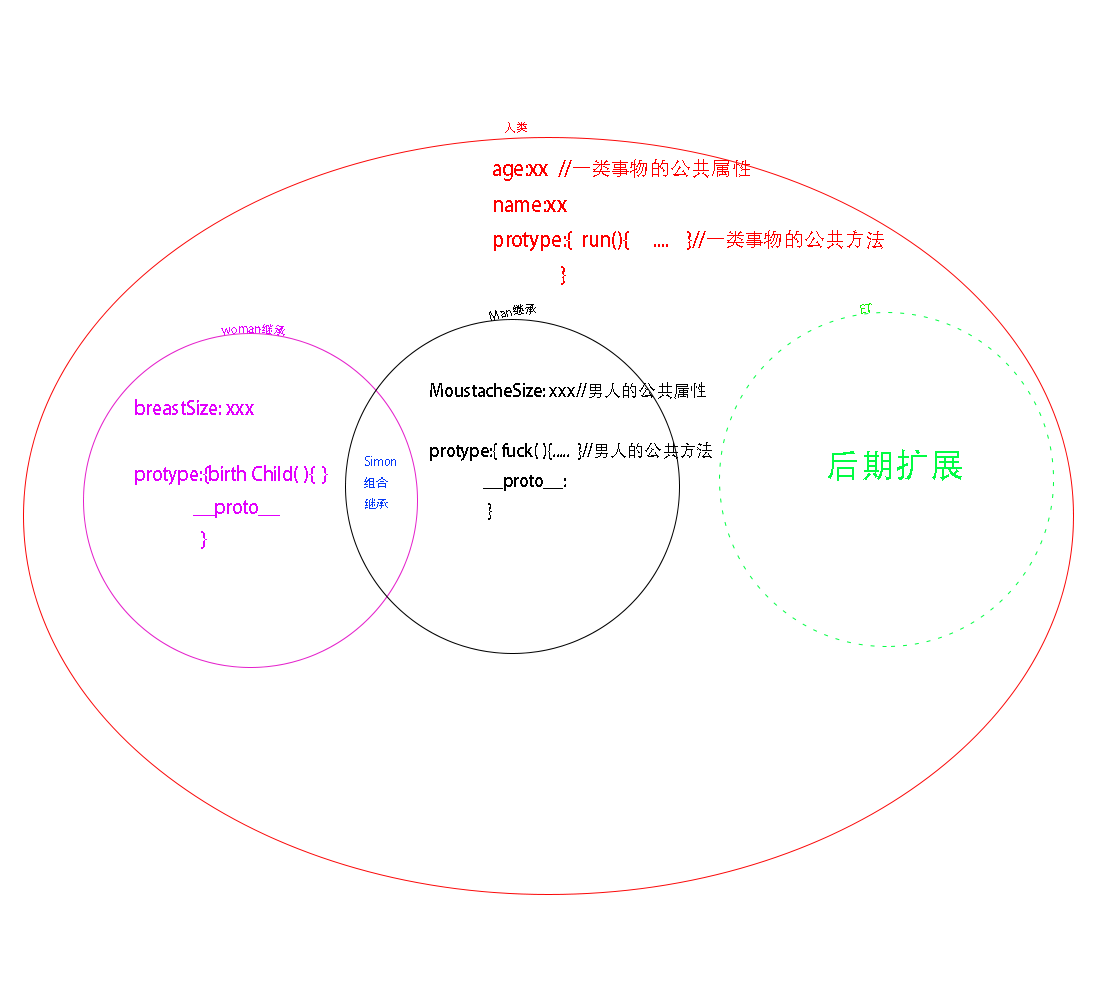
<style>
.page{position:relative;width:1117px;height:1000px;background:#ffffff}
.page>*{position:absolute;margin:0}
.t1{font:12px "AdobeHeitiStd-Regular";color:#fd020e}
.t2{font:20.2px "AdobeHeitiStd-Regular";color:#fd0000}
.t3{font:12px "AdobeHeitiStd-Regular";color:#000000}
.t4{font:12px "AdobeHeitiStd-Regular";color:#15f204}
.t5{font:12px "AdobeHeitiStd-Regular";color:#e200fd}
.t6{font:17.3px "AdobeHeitiStd-Regular";color:#000000}
.t7{font:18.8px "AdobeHeitiStd-Regular";color:#e200fd}
.t8{font:33.8px "AdobeHeitiStd-Regular";color:#02fd43}
.t9{font:12px "AdobeHeitiStd-Regular";color:#0639f7}
</style>
<div class="page">
<p class="t1" style="left:505px;top:122px;width:22px;height:11px">人类</p>
<p class="t2" style="left:493px;top:159px;width:391px;height:126px">age:xx  //一类事物的公共属性<br>name:xx<br>protype:{  run(){     ....    }//一类事物的公共方法 <br>               }</p>
<p class="t3" style="left:489px;top:304px;width:47px;height:17px">Man继承</p>
<p class="t4" style="left:860px;top:303px;width:12px;height:11px">ET</p>
<p class="t5" style="left:221px;top:324px;width:64px;height:12px">woman继承</p>
<p class="t6" style="left:430px;top:382px;width:282px;height:138px">MoustacheSize: xxx//男人的公共属性<br><br>protype:{ fuck( ){.....  }//男人的公共方法<br>              __proto__:<br>               }</p>
<p class="t7" style="left:135px;top:399px;width:193px;height:150px">breastSize: xxx<br><br>protype:{birth Child( ){  }<br>              __proto__<br>                }</p>
<p class="t8" style="left:828px;top:449px;width:134px;height:32px">后期扩展</p>
<p class="t9" style="left:364px;top:456px;width:32px;height:53px">Simon<br>组合<br>继承</p>
</div>
